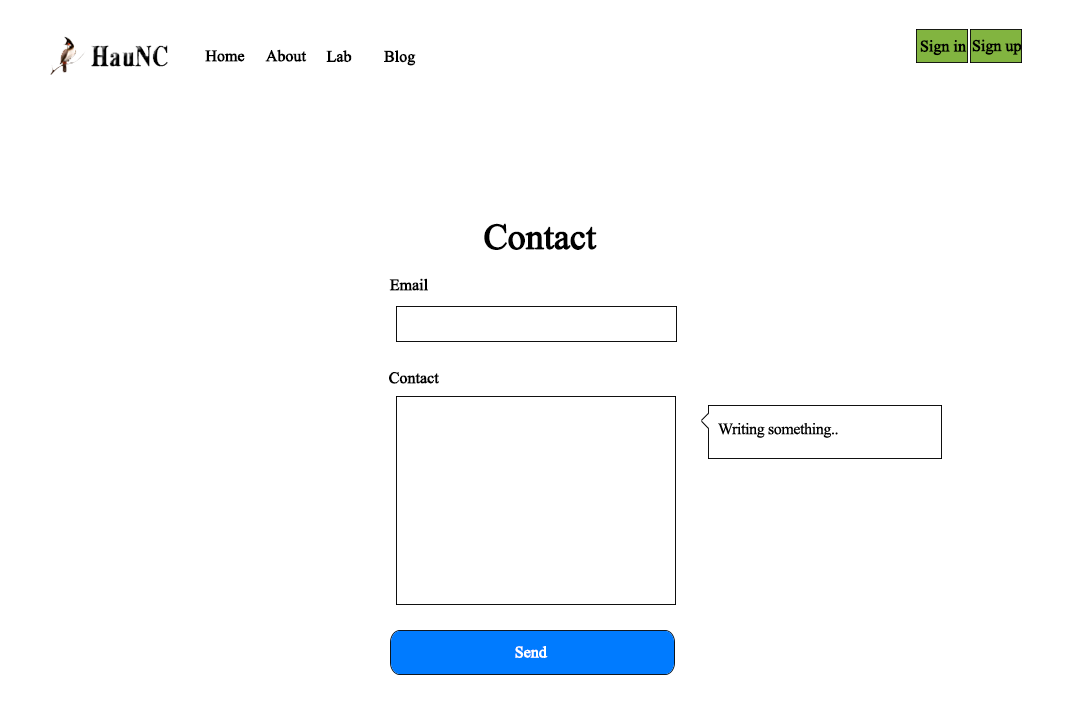
<style>
.page{position:relative;width:1080px;height:720px;background:#ffffff}
.page>*{position:absolute;margin:0}
.t1{font:16px "TimesNewRomanPSMT";letter-spacing:-0.025em;color:#000000;font-weight:bold}
.t2{font:36px "TimesNewRomanPSMT";letter-spacing:-0.025em;color:#000000;font-weight:bold}
.t3{font:16px "TimesNewRomanPSMT";letter-spacing:-0.025em;color:#ffffff;font-weight:bold}
</style>
<div class="page">
<p class="t1" style="left:920px;top:40px;width:47px;height:16px">Sign in</p>
<p class="t1" style="left:972px;top:39px;width:50px;height:16px">Sign up</p>
<p class="t1" style="left:205px;top:50px;width:40px;height:12px">Home</p>
<p class="t1" style="left:265px;top:49px;width:42px;height:13px">About</p>
<p class="t1" style="left:326px;top:50px;width:26px;height:13px">Lab</p>
<p class="t1" style="left:384px;top:50px;width:32px;height:16px">Blog</p>
<p class="t2" style="left:484px;top:223px;width:113px;height:27px">Contact</p>
<p class="t1" style="left:389px;top:278px;width:39px;height:13px">Email</p>
<p class="t1" style="left:389px;top:372px;width:50px;height:12px">Contact</p>
<p class="t3" style="left:515px;top:646px;width:33px;height:12px">Send</p>
</div>
